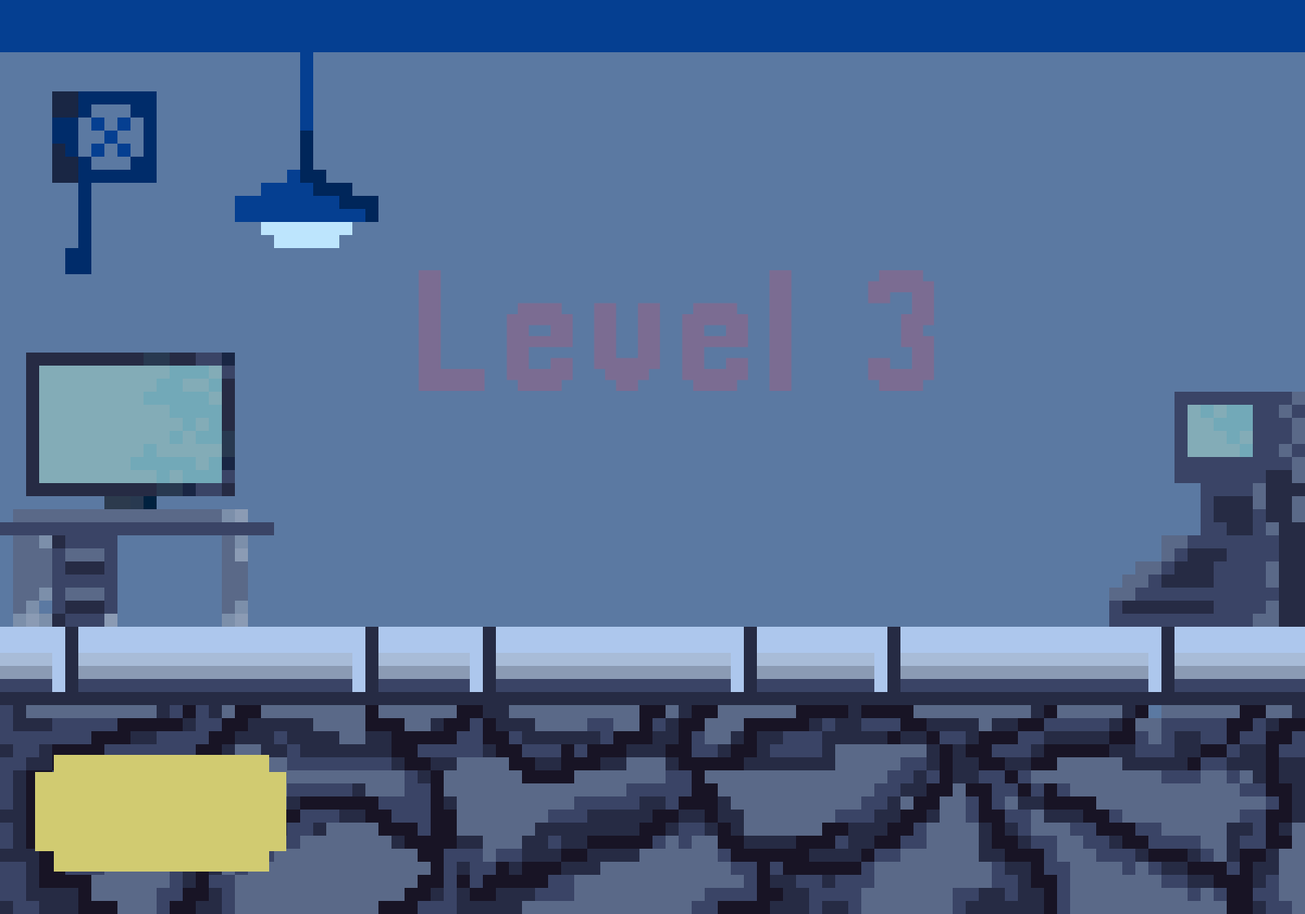
<style>
.page{position:relative;width:1305px;height:914px;background:#5b79a2}
.page>*{position:absolute;margin:0}
.t1{font:175.2px "Pixellari";color:#7b6c92}
</style>
<div class="page">
<p class="t1" style="left:418px;top:270px;width:517px;height:121px">Level 3</p>
</div>
